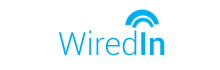
<style>
.page{position:relative;width:220px;height:70px;background:#ffffff}
.page>*{position:absolute;margin:0}
.t1{font:31.9px "Roboto-Light";color:#00aeef}
.t2{font:31.9px "Roboto-Medium";color:#00aeef}
</style>
<div class="page">
<p class="t1" style="left:59px;top:30px;width:106px;height:26px">Wired<span class="t2">In</span></p>
</div>
